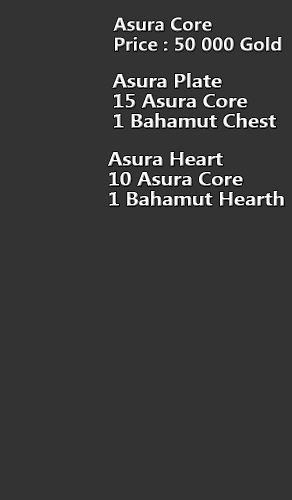
<style>
.page{position:relative;width:292px;height:500px;background:#333333}
.page>*{position:absolute;margin:0}
.t1{font:18.7px/20px "LaoUI-Bold";color:#ffffff;scale:1.03 1}
.t2{font:20px/20px "LaoUI-Bold";color:#ffffff;scale:1.03 1}
</style>
<div class="page">
<p class="t1" style="left:113px;top:17px;width:169px;height:35px;text-align:right">Asura Core <br>Price : 50 000 Gold</p>
<p class="t2" style="left:112px;top:73px;width:164px;height:55px;text-align:right">Asura Plate <br>15 Asura Core<br>1 Bahamut Chest</p>
<p class="t2" style="left:108px;top:152px;width:176px;height:54px;text-align:right">Asura Heart<br>10 Asura Core<br>1 Bahamut Hearth</p>
</div>
